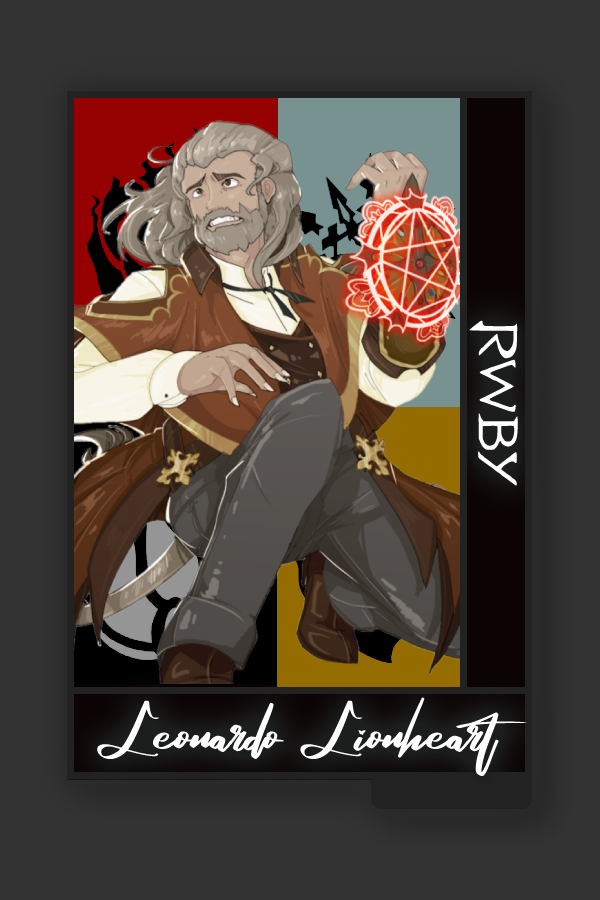
<style>
.page{position:relative;width:600px;height:900px;background:#333333}
.page>*{position:absolute;margin:0}
.t1{font:61.3px "RWBY_Style";color:#ffffff;scale:1.25 1}
.t2{font:75px "RosegaFREE";color:#ffffff}
</style>
<div class="page">
<p class="t1" style="left:469px;top:320px;width:49px;height:166px;rotate:90deg">RWBY</p>
<p class="t2" style="left:86px;top:697px;width:442px;height:80px">Leonardo Lionheart</p>
</div>
